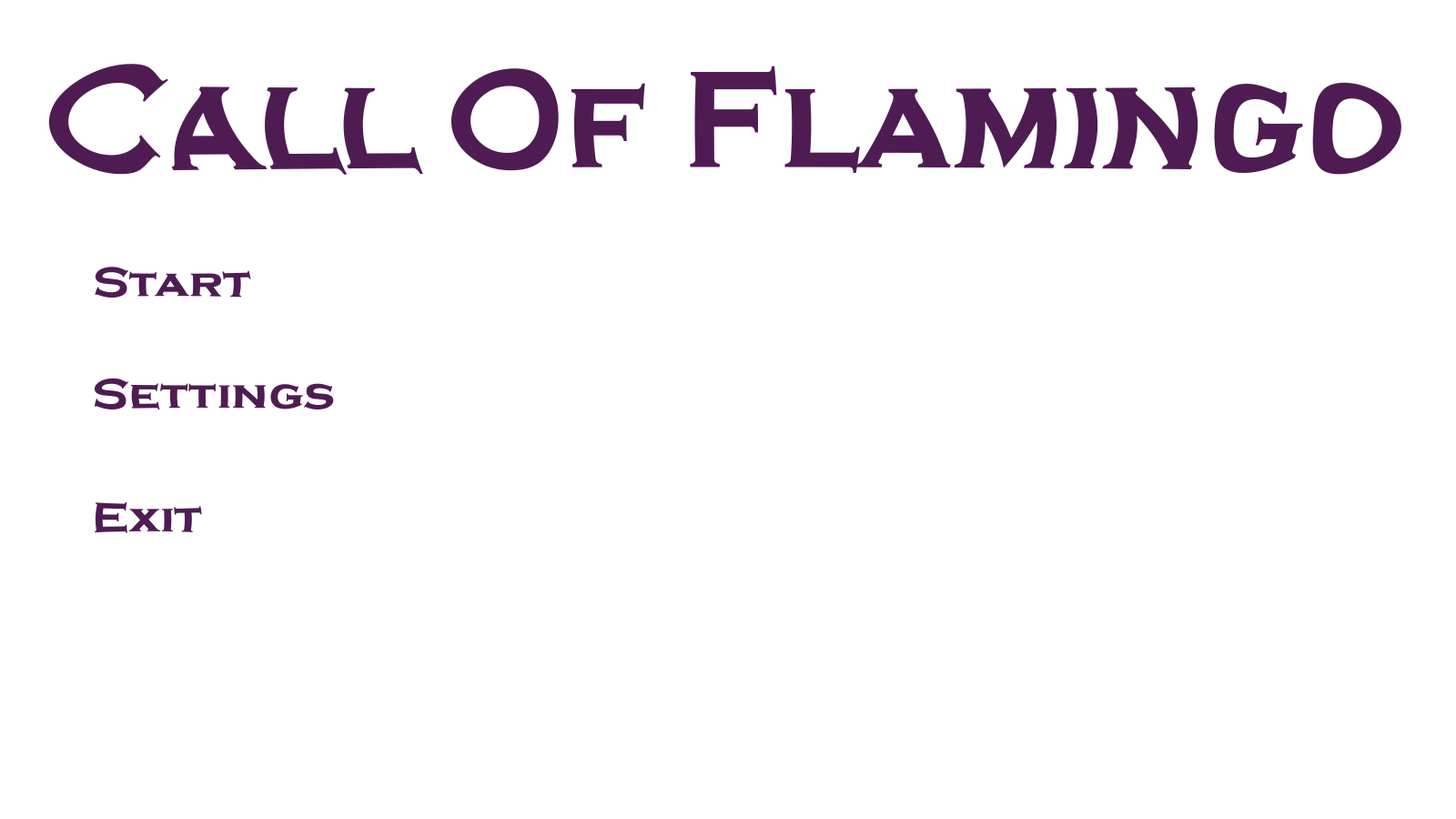
<style>
.page{position:relative;width:1456px;height:819px;background:#ffffff}
.page>*{position:absolute;margin:0}
.t1{font:38.4px "CopperplateGothic-Bold";color:#4e1c53;scale:0.78 1}
.t2{font:10.9px "CopperplateGothic-Bold";color:#4e1c53}
</style>
<div class="page">
<p class="t1" style="left:48px;top:64px;width:1353px;height:111px">Call Of Flamingo</p>
<p class="t2" style="left:95px;top:267px;width:156px;height:31px">Start</p>
<p class="t2" style="left:95px;top:378px;width:239px;height:32px">Settings</p>
<p class="t2" style="left:95px;top:501px;width:107px;height:32px">Exit</p>
</div>
